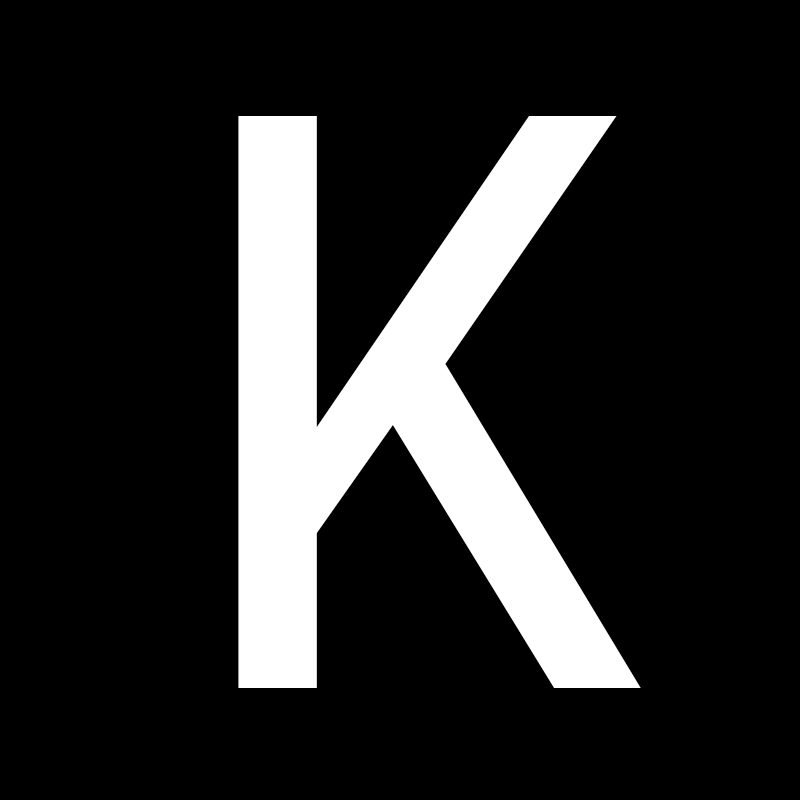
<style>
.page{position:relative;width:800px;height:800px;background:#000000}
.page>*{position:absolute;margin:0}
.t1{font:800px "TrebuchetMS";color:#ffffff}
</style>
<div class="page">
<p class="t1" style="left:238px;top:116px;width:403px;height:572px">K</p>
</div>
